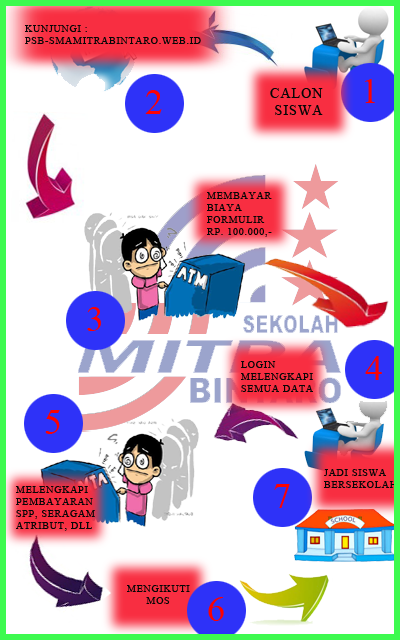
<style>
.page{position:relative;width:400px;height:640px;background:#ffffff}
.page>*{position:absolute;margin:0}
.t1{font:10px "TimesNewRomanPSMT";letter-spacing:0.075em;color:#060606;text-transform:uppercase}
.t2{font:14px "TimesNewRomanPSMT";letter-spacing:0.075em;color:#060606;text-transform:uppercase}
.t3{font:36px "TimesNewRomanPSMT";letter-spacing:0.075em;color:#fc0202;text-transform:uppercase}
</style>
<div class="page">
<p class="t1" style="left:25px;top:25px;width:176px;height:19px">kunjungi :<br>psb-smamitrabintaro.web.id</p>
<p class="t2" style="left:270px;top:88px;width:53px;height:27px">CALON<br> SISWA</p>
<p class="t3" style="left:365px;top:79px;width:10px;height:24px">1</p>
<p class="t3" style="left:145px;top:90px;width:17px;height:24px">2</p>
<p class="t1" style="left:207px;top:192px;width:65px;height:45px">membayar<br>Biaya<br>formulir<br>rp. 100.000,-</p>
<p class="t3" style="left:87px;top:307px;width:14px;height:24px">3</p>
<p class="t1" style="left:241px;top:361px;width:72px;height:31px">login<br>Melengkapi<br>semua data</p>
<p class="t3" style="left:365px;top:356px;width:17px;height:24px">4</p>
<p class="t3" style="left:45px;top:410px;width:15px;height:24px">5</p>
<p class="t1" style="left:324px;top:469px;width:73px;height:19px">jadi siswa<br>bersekolah</p>
<p class="t1" style="left:16px;top:486px;width:79px;height:45px">melengkapi<br>pembayaran <br>spp, seragam<br>atribut, dll</p>
<p class="t3" style="left:274px;top:484px;width:16px;height:24px">7</p>
<p class="t1" style="left:127px;top:585px;width:63px;height:19px">mengikuti<br>      MOS</p>
<p class="t3" style="left:208px;top:597px;width:16px;height:24px">6</p>
</div>
